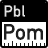
<style>
.page{position:relative;width:48px;height:48px;background:#000000}
.page>*{position:absolute;margin:0}
.t1{font:16px "DINAlternate-Bold";color:#e1e1e1}
.t2{font:22px "DINAlternate-Bold";color:#1e1e1e}
</style>
<div class="page">
<p class="t1" style="left:4px;top:5px;width:21px;height:12px">Pbl</p>
<p class="t2" style="left:4px;top:24px;width:39px;height:16px">Pom</p>
</div>
